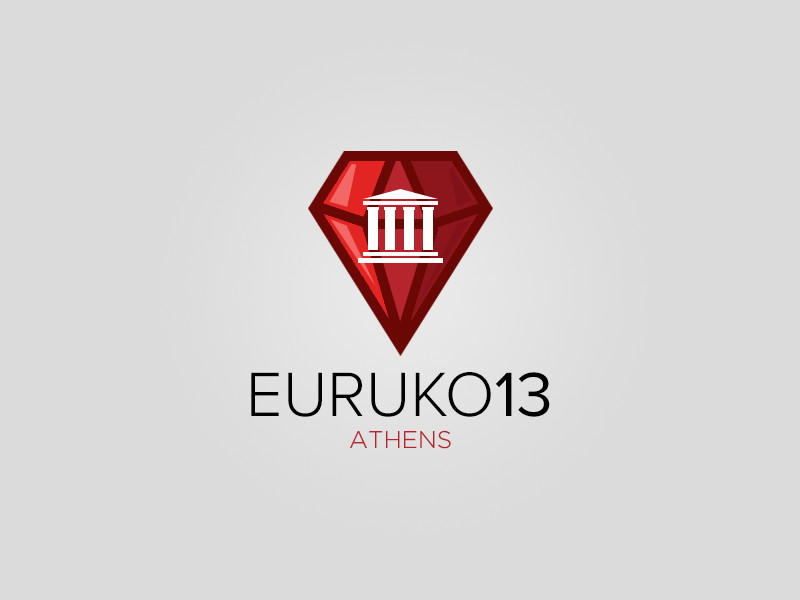
<style>
.page{position:relative;width:800px;height:600px;background:#dbdbdb}
.page>*{position:absolute;margin:0}
.t1{font:65px "ProximaNova-Light";color:#000000}
.t2{font:65px "ProximaNova-Regular";color:#000000}
.t3{font:24px "GothamLight";color:#b6242d}
</style>
<div class="page">
<p class="t1" style="left:251px;top:372px;width:299px;height:45px">EURUKO<span class="t2">13</span></p>
<p class="t3" style="left:350px;top:430px;width:101px;height:19px">ATHENS</p>
</div>
